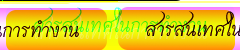
<style>
.page{position:relative;width:240px;height:50px}
.page>*{position:absolute;margin:0}
.t1{font:28px "THCharmonman"}
</style>
<div class="page">
<p class="t1" style="left:34px;top:7px;width:173px;height:25px">สารสนเทศในการทำงาน</p>
</div>
